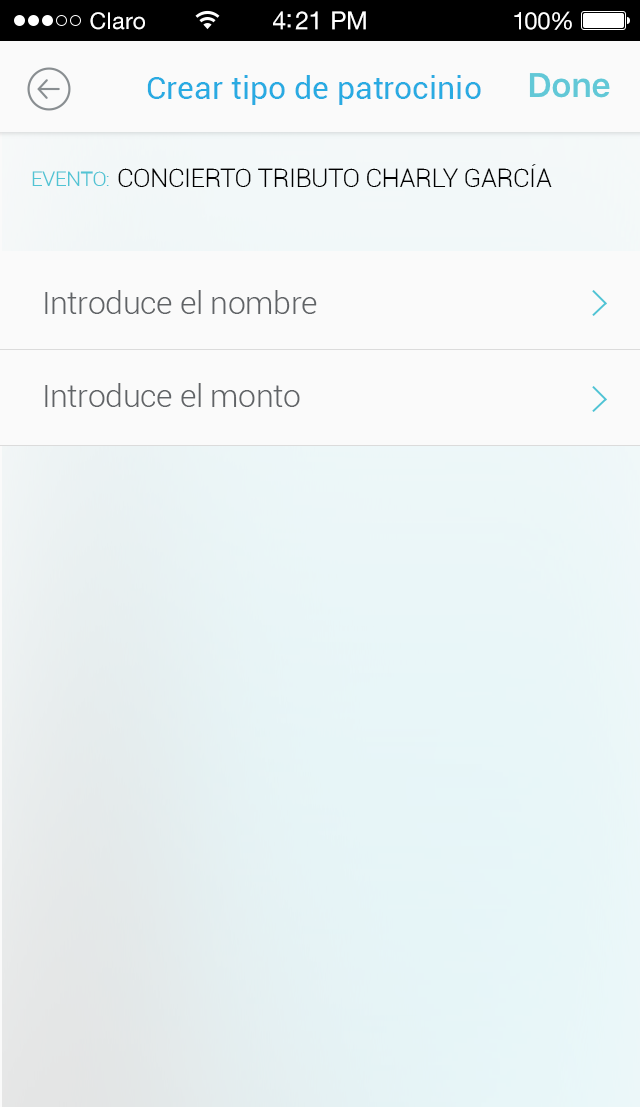
<style>
.page{position:relative;width:640px;height:1107px;background:#fafafa}
.page>*{position:absolute;margin:0}
.t1{font:23px "HelveticaNeueLTStd-Roman";letter-spacing:0.02em;color:#ffffff}
.t2{font:25px "HelveticaNeueLTStd-Roman";letter-spacing:-0.02em;color:#ffffff}
.t3{font:24px "HelveticaNeueLTStd-Roman";letter-spacing:-0.02em;color:#ffffff}
.t4{font:32px "Roboto-Regular";color:#29abe2}
.t5{font:20.4px "Roboto-Light";letter-spacing:-0.01em;color:#51c4d4}
.t6{font:25px "Roboto-Light";letter-spacing:-0.01em;color:#000000}
.t7{font:32px "Roboto-Light";letter-spacing:-0.01em;color:#606366}
</style>
<div class="page">
<p class="t1" style="left:90px;top:12px;width:55px;height:18px">Claro</p>
<p class="t2" style="left:273px;top:11px;width:93px;height:19px">4:21 PM</p>
<p class="t3" style="left:514px;top:11px;width:58px;height:19px">100%</p>
<p class="t4" style="left:147px;top:75px;width:334px;height:30px">Crear tipo de patrocinio</p>
<p class="t5" style="left:32px;top:171px;width:77px;height:15px">EVENTO:</p>
<p class="t6" style="left:118px;top:164px;width:434px;height:23px">CONCIERTO TRIBUTO CHARLY GARCÍA</p>
<p class="t7" style="left:45px;top:290px;width:272px;height:24px">Introduce el nombre</p>
<p class="t7" style="left:45px;top:383px;width:255px;height:24px">Introduce el monto</p>
</div>
